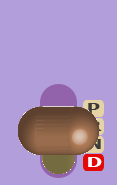
<style>
.page{position:relative;width:117px;height:185px;background:#b29eda}
.page>*{position:absolute;margin:0}
.t1{font:14px "Tahoma-Bold";color:#3b3b3b;scale:1.4 1}
.t2{font:14px "Tahoma-Bold";scale:1.4 1}
.t3{font:14px "Tahoma-Bold";color:#ffffff;scale:1.4 1}
</style>
<div class="page">
<p class="t1" style="left:88px;top:103px;width:12px;height:10px">P</p>
<p class="t2" style="left:88px;top:121px;width:14px;height:10px">R</p>
<p class="t2" style="left:88px;top:139px;width:13px;height:10px">N</p>
<p class="t3" style="left:88px;top:157px;width:14px;height:10px">D</p>
</div>
